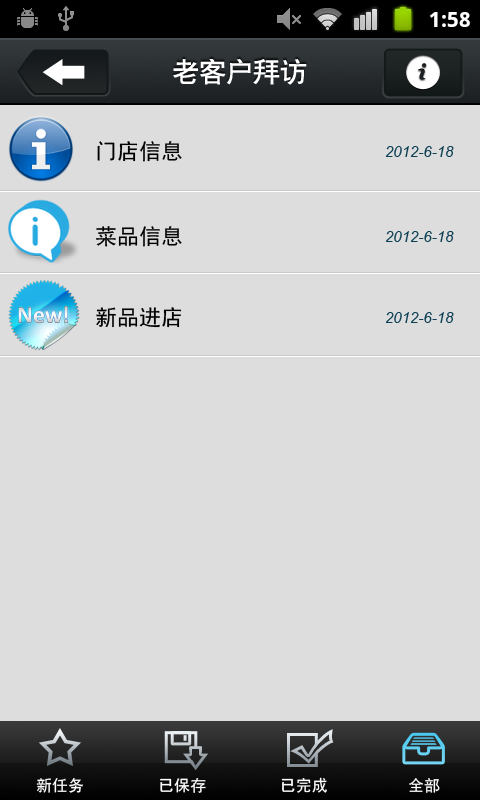
<style>
.page{position:relative;width:480px;height:800px;background:#dddddd}
.page>*{position:absolute;margin:0}
.t1{font:27px "CTCuHeiSJ";color:#ffffff}
.t2{font:22px "SimHei";color:#000000}
.t3{font:15px "Arial-ItalicMT";color:#0e4054}
.t4{font:16px "SimHei";color:#ffffff}
</style>
<div class="page">
<p class="t1" style="left:173px;top:59px;width:134px;height:26px">老客户拜访</p>
<p class="t2" style="left:97px;top:141px;width:85px;height:21px">门店信息</p>
<p class="t3" style="left:385px;top:146px;width:69px;height:11px">2012-6-18</p>
<p class="t2" style="left:96px;top:226px;width:86px;height:21px">菜品信息</p>
<p class="t3" style="left:385px;top:231px;width:69px;height:11px">2012-6-18</p>
<p class="t2" style="left:96px;top:307px;width:86px;height:21px">新品进店</p>
<p class="t3" style="left:385px;top:312px;width:69px;height:11px">2012-6-18</p>
<p class="t4" style="left:36px;top:778px;width:47px;height:15px">新任务</p>
<p class="t4" style="left:160px;top:778px;width:46px;height:15px">已保存</p>
<p class="t4" style="left:281px;top:777px;width:46px;height:16px">已完成</p>
<p class="t4" style="left:409px;top:778px;width:31px;height:15px">全部</p>
</div>
